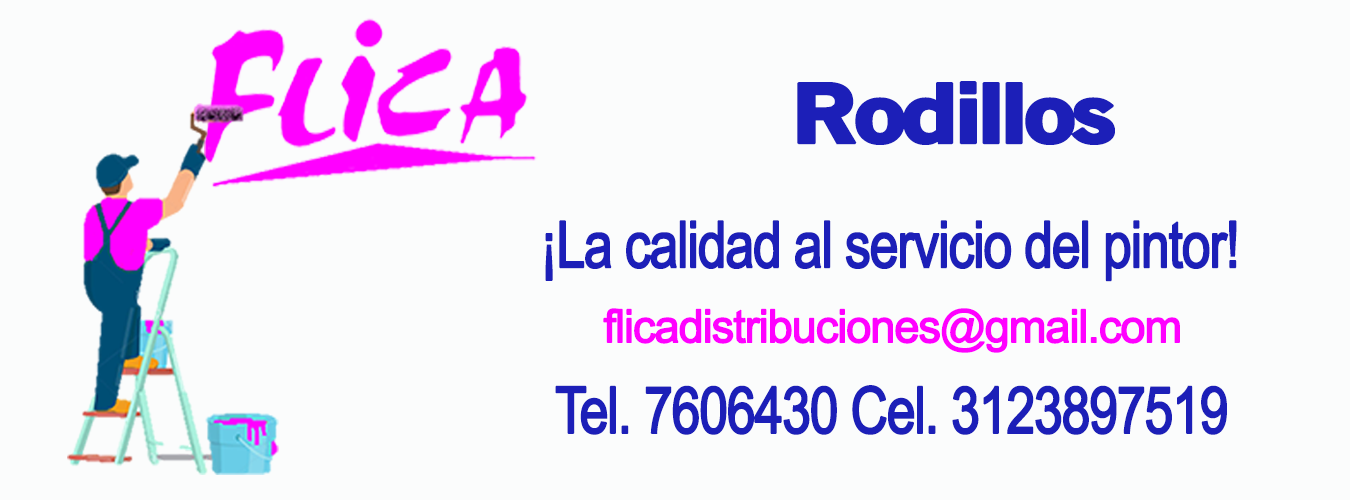
<style>
.page{position:relative;width:1350px;height:500px;background:#fbfcfc}
.page>*{position:absolute;margin:0}
.t1{font:60.5px "OldSansBlack";letter-spacing:-0.05em;color:#1c1fb8;font-weight:bold;scale:1.22 1}
.t2{font:48.3px "ArialMT";letter-spacing:-0.05em;color:#1c1fb8;font-weight:bold;scale:0.8 1}
.t3{font:34.4px "ArialMT";letter-spacing:-0.05em;color:#ff00ff;font-weight:bold}
</style>
<div class="page">
<p class="t1" style="left:797px;top:81px;width:318px;height:64px">Rodillos</p>
<p class="t2" style="left:545px;top:220px;width:692px;height:62px">¡La calidad al servicio del pintor!</p>
<p class="t3" style="left:603px;top:308px;width:577px;height:45px">flicadistribuciones@gmail.com</p>
<p class="t2" style="left:555px;top:385px;width:672px;height:50px">Tel. 7606430 Cel. 3123897519</p>
</div>
